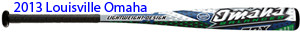
<style>
.page{position:relative;width:300px;height:32px;background:#ffffff}
.page>*{position:absolute;margin:0}
.t1{font:14px "MyriadPro-Regular";color:#0000ff}
</style>
<div class="page">
<p class="t1" style="left:14px;top:2px;width:133px;height:10px">2013 Louisville Omaha</p>
</div>
